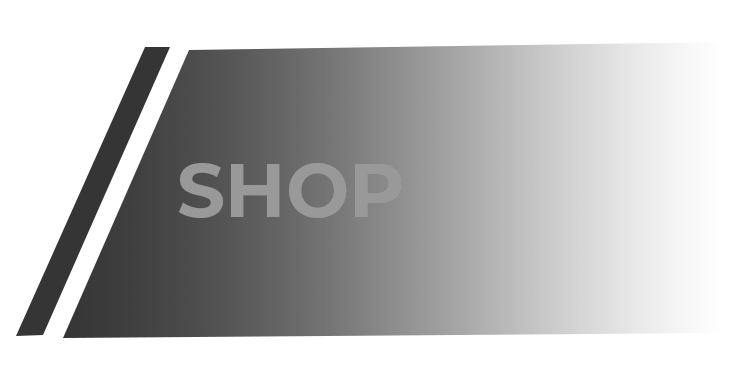
<style>
.page{position:relative;width:753px;height:372px;background:#ffffff}
.page>*{position:absolute;margin:0}
.t1{font:75px "Montserrat-Bold";color:#999999}
</style>
<div class="page">
<p class="t1" style="left:179px;top:163px;width:222px;height:55px">SHOP</p>
</div>
